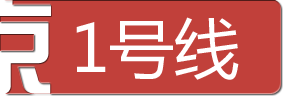
<style>
.page{position:relative;width:283px;height:96px;background:#c1403a}
.page>*{position:absolute;margin:0}
.t1{font:65px "MicrosoftYaHei";color:#ffffff}
</style>
<div class="page">
<p class="t1" style="left:76px;top:17px;width:163px;height:63px">1号线</p>
</div>
